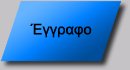
<style>
.page{position:relative;width:130px;height:70px}
.page>*{position:absolute;margin:0}
.t1{font:14.7px "ArialMT";color:#000000}
</style>
<div class="page">
<p class="t1" style="left:30px;top:23px;width:62px;height:15px">Έγγραφο</p>
</div>
